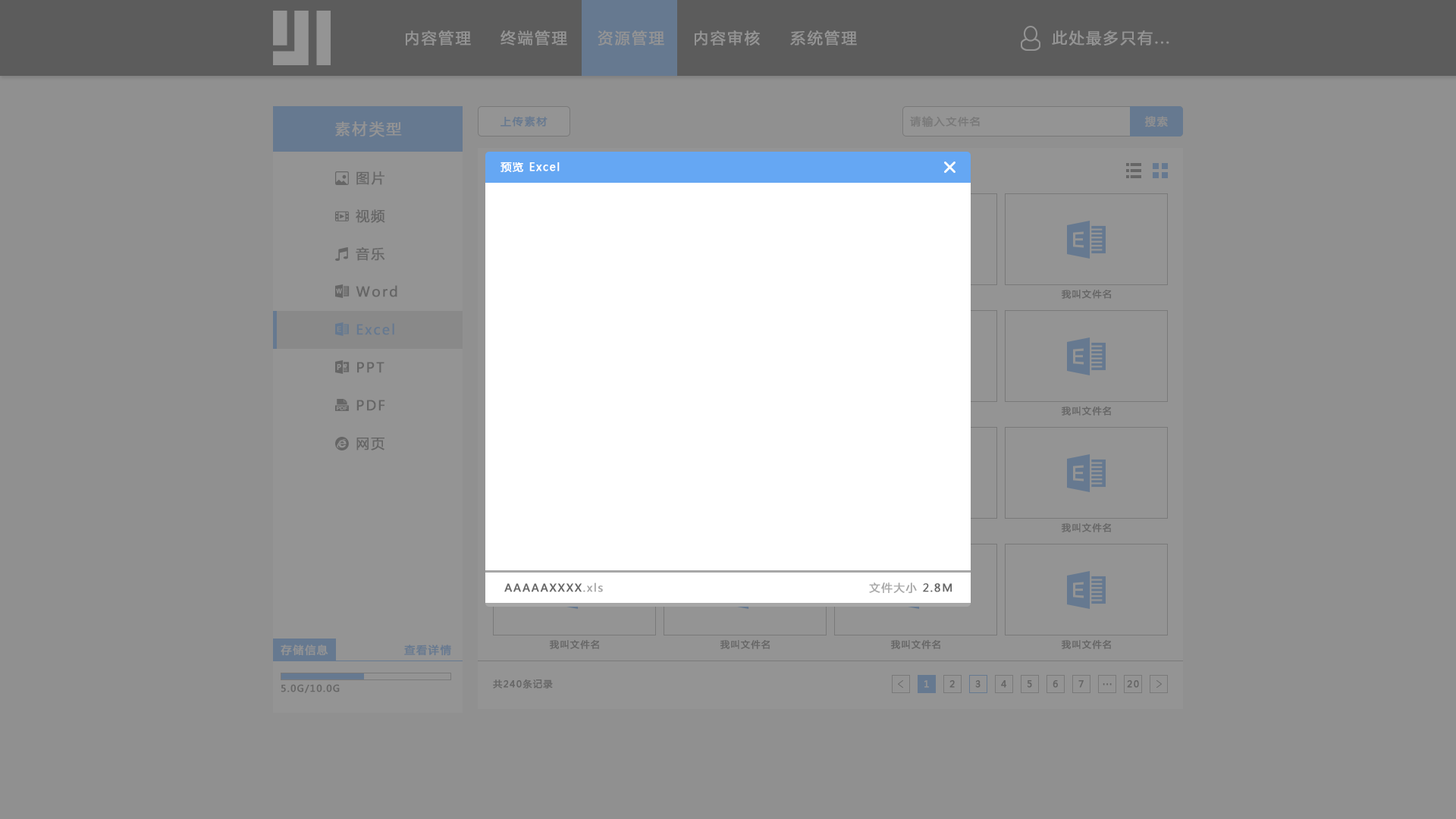
<style>
.page{position:relative;width:1456px;height:819px;background:#909090}
.page>*{position:absolute;margin:0}
.t1{font:15.2px "MicrosoftYaHei";letter-spacing:0.1em;color:#949494;font-weight:bold}
.t2{font:10.6px "MicrosoftYaHei";letter-spacing:0.1em;color:#667990;font-weight:bold}
.t3{font:10.6px "MicrosoftYaHei";letter-spacing:0.1em;color:#797979;font-weight:bold}
.t4{font:10.6px "MicrosoftYaHei";letter-spacing:0.1em;color:#909090;font-weight:bold}
.t5{font:10.6px "MicrosoftYaHei";letter-spacing:0.1em;color:#ffffff;font-weight:bold}
.t6{font:13.6px "MicrosoftYaHei";letter-spacing:0.1em;color:#666666;font-weight:bold}
.t7{font:9.1px "MicrosoftYaHei";letter-spacing:0.1em;color:#666666;font-weight:bold}
.t8{font:13.6px "MicrosoftYaHei";letter-spacing:0.1em;color:#667990;font-weight:bold}
.t9{font:10.6px "MicrosoftYaHei";letter-spacing:0.1em;color:#666666;font-weight:bold}
.t10{font:10.6px "MicrosoftYaHei";letter-spacing:0.1em;color:#a7a7a7;font-weight:bold}
.t11{font:10.6px "MicrosoftYaHei";letter-spacing:0.1em;color:#949494;font-weight:bold}
.t12{font:9px "MicrosoftYaHei";letter-spacing:0.1em;color:#666666;font-weight:bold}
.t13{font:9.1px "MicrosoftYaHei";letter-spacing:0.1em;color:#949494;font-weight:bold}
</style>
<div class="page">
<p class="t1" style="left:406px;top:30px;width:65px;height:15px">内容管理</p>
<p class="t1" style="left:500px;top:30px;width:67px;height:15px">终端管理</p>
<p class="t1" style="left:598px;top:30px;width:66px;height:15px">资源管理</p>
<p class="t1" style="left:695px;top:30px;width:65px;height:15px">内容审核</p>
<p class="t1" style="left:790px;top:30px;width:67px;height:15px">系统管理</p>
<p class="t1" style="left:1052px;top:30px;width:117px;height:15px">此处最多只有...</p>
<p class="t1" style="left:335px;top:121px;width:67px;height:16px">素材类型</p>
<p class="t2" style="left:500px;top:116px;width:48px;height:11px">上传素材</p>
<p class="t3" style="left:910px;top:116px;width:70px;height:11px">请输入文件名</p>
<p class="t4" style="left:1144px;top:116px;width:24px;height:11px">搜索</p>
<p class="t5" style="left:500px;top:162px;width:60px;height:10px">预览 Excel</p>
<p class="t6" style="left:356px;top:171px;width:28px;height:14px">图片</p>
<p class="t6" style="left:356px;top:209px;width:29px;height:14px">视频</p>
<p class="t6" style="left:356px;top:247px;width:29px;height:14px">音乐</p>
<p class="t6" style="left:356px;top:285px;width:41px;height:12px">Word</p>
<p class="t7" style="left:1061px;top:290px;width:51px;height:9px">我叫文件名</p>
<p class="t8" style="left:356px;top:323px;width:38px;height:12px">Excel</p>
<p class="t6" style="left:357px;top:362px;width:27px;height:11px">PPT</p>
<p class="t6" style="left:356px;top:400px;width:29px;height:11px">PDF</p>
<p class="t7" style="left:1061px;top:406px;width:50px;height:10px">我叫文件名</p>
<p class="t6" style="left:356px;top:438px;width:28px;height:12px">网页</p>
<p class="t7" style="left:1061px;top:522px;width:50px;height:10px">我叫文件名</p>
<p class="t9" style="left:504px;top:582px;width:99px;height:10px">AAAAAXXXX<span class="t10">.xls</span></p>
<p class="t10" style="left:869px;top:582px;width:83px;height:12px">文件大小<span class="t9"> 2.8M</span></p>
<p class="t7" style="left:549px;top:639px;width:50px;height:10px">我叫文件名</p>
<p class="t7" style="left:720px;top:639px;width:50px;height:10px">我叫文件名</p>
<p class="t7" style="left:890px;top:639px;width:50px;height:10px">我叫文件名</p>
<p class="t7" style="left:1061px;top:639px;width:50px;height:10px">我叫文件名</p>
<p class="t11" style="left:281px;top:645px;width:47px;height:11px">存储信息</p>
<p class="t2" style="left:404px;top:645px;width:47px;height:11px">查看详情</p>
<p class="t12" style="left:281px;top:684px;width:59px;height:9px">5.0G/10.0G</p>
<p class="t7" style="left:493px;top:679px;width:60px;height:10px">共240条记录</p>
<p class="t13" style="left:924px;top:680px;width:5px;height:8px">1</p>
<p class="t7" style="left:949px;top:680px;width:6px;height:8px">2</p>
<p class="t7" style="left:975px;top:680px;width:6px;height:8px">3</p>
<p class="t7" style="left:1001px;top:680px;width:6px;height:8px">4</p>
<p class="t7" style="left:1027px;top:680px;width:5px;height:8px">5</p>
<p class="t7" style="left:1053px;top:680px;width:5px;height:8px">6</p>
<p class="t7" style="left:1078px;top:680px;width:6px;height:8px">7</p>
<p class="t7" style="left:1103px;top:683px;width:9px;height:3px">...</p>
<p class="t7" style="left:1127px;top:680px;width:12px;height:8px">20</p>
</div>
